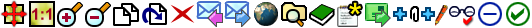
<style>
.page{position:relative;width:532px;height:28px;background:#ffffff}
.page>*{position:absolute;margin:0}
.t1{font:40px "Latha";color:#fff200}
.t2{font:16px "Arial-BoldMT";color:#a3021f}
</style>
<div class="page">
<p class="t1" style="left:349px;top:2px;width:12px;height:13px">*</p>
<p class="t2" style="left:32px;top:8px;width:20px;height:12px">1:1</p>
</div>
